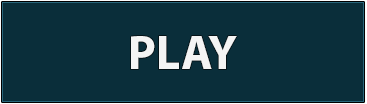
<style>
.page{position:relative;width:367px;height:104px;background:#0a2e3a}
.page>*{position:absolute;margin:0}
.t1{font:48px "MyriadHebrew-Bold";color:#f4f4f4}
</style>
<div class="page">
<p class="t1" style="left:131px;top:36px;width:106px;height:33px">PLAY</p>
</div>
